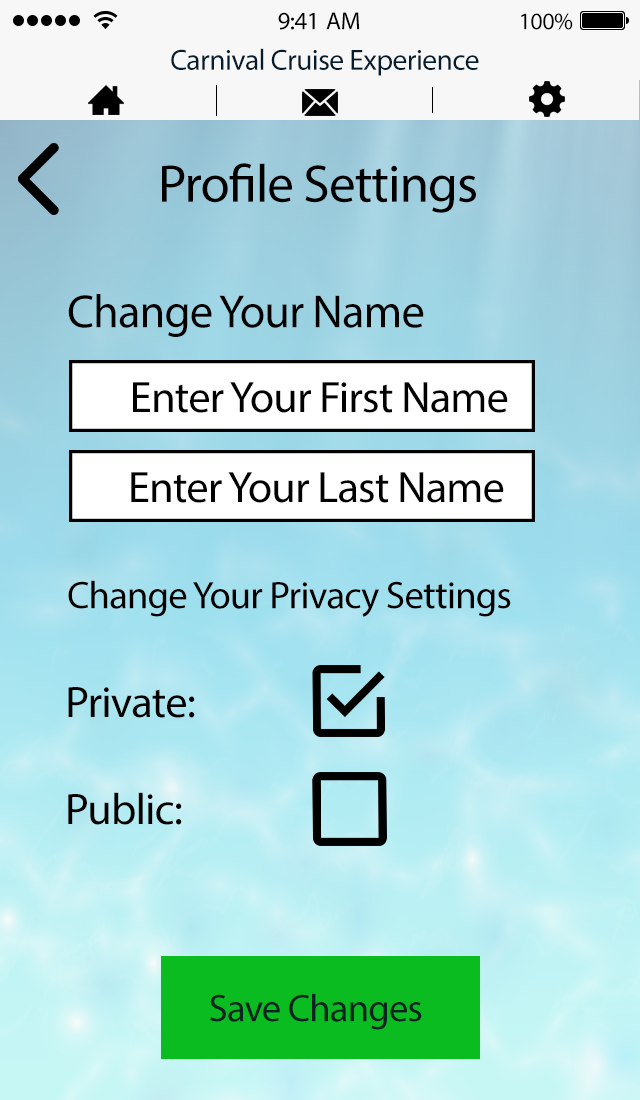
<style>
.page{position:relative;width:640px;height:1100px}
.page>*{position:absolute;margin:0}
.t1{font:25px "MyriadPro-Regular";letter-spacing:-0.02em;color:#000000}
.t2{font:24px "MyriadPro-Regular";letter-spacing:-0.02em;color:#000000}
.t3{font:29.4px "MyriadPro-Regular";letter-spacing:-0.02em;color:#061d30}
.t4{font:53.4px "MyriadPro-Regular";letter-spacing:-0.02em;color:#000000}
.t5{font:46.9px "MyriadPro-Regular";letter-spacing:-0.02em;color:#000000}
.t6{font:44.2px "MyriadPro-Regular";letter-spacing:-0.02em;color:#000000}
.t7{font:38.6px "MyriadPro-Regular";letter-spacing:-0.02em;color:#000000}
.t8{font:38.6px "MyriadPro-Regular";letter-spacing:-0.02em;color:#0a2320}
</style>
<div class="page">
<p class="t1" style="left:278px;top:12px;width:82px;height:18px">9:41 AM</p>
<p class="t2" style="left:521px;top:13px;width:52px;height:17px">100%</p>
<p class="t3" style="left:171px;top:48px;width:308px;height:28px">Carnival Cruise Experience</p>
<p class="t4" style="left:162px;top:163px;width:314px;height:50px">Profile Settings</p>
<p class="t5" style="left:68px;top:294px;width:356px;height:43px">Change Your Name</p>
<p class="t6" style="left:133px;top:382px;width:375px;height:31px">Enter Your First Name</p>
<p class="t6" style="left:131px;top:472px;width:373px;height:31px">Enter Your Last Name</p>
<p class="t7" style="left:68px;top:580px;width:443px;height:37px">Change Your Privacy Settings</p>
<p class="t6" style="left:68px;top:687px;width:127px;height:31px">Private:</p>
<p class="t6" style="left:68px;top:792px;width:114px;height:33px">Public:</p>
<p class="t8" style="left:210px;top:993px;width:212px;height:37px">Save Changes</p>
</div>
